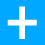
<style>
.page{position:relative;width:45px;height:45px;background:#00a8ff}
.page>*{position:absolute;margin:0}
.t1{font:60.5px "MyriadPro-Bold";color:#ffffff;scale:0.92 1}
</style>
<div class="page">
<p class="t1" style="left:7px;top:6px;width:30px;height:33px">+</p>
</div>
